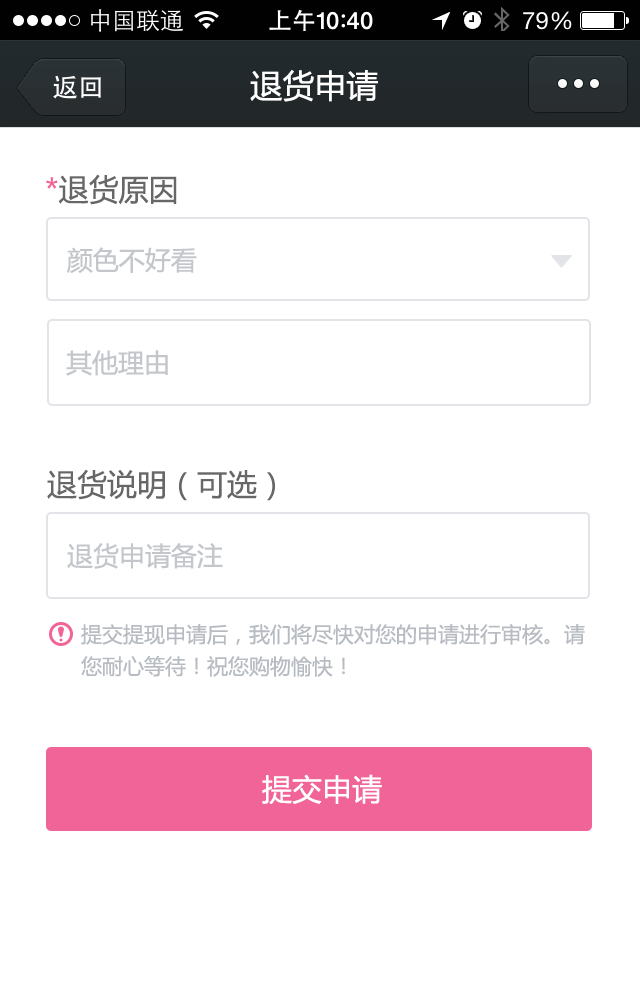
<style>
.page{position:relative;width:640px;height:997px;background:#ffffff}
.page>*{position:absolute;margin:0}
.t1{font:32px "MicrosoftYaHei";color:#ffffff}
.t2{font:30px "MicrosoftYaHei";color:#676767}
.t3{font:30px "MicrosoftYaHei";color:#f16498}
.t4{font:26px "MicrosoftYaHei";color:#c3c6cb}
.t5{font:21px/32px "MicrosoftYaHei";color:#b7bbc2}
.t6{font:30px "MicrosoftYaHei";color:#ffffff}
</style>
<div class="page">
<p class="t1" style="left:250px;top:70px;width:128px;height:32px">退货申请</p>
<p class="t2" style="left:46px;top:174px;width:131px;height:31px"><span class="t3">*</span>退货原因</p>
<p class="t4" style="left:67px;top:247px;width:130px;height:27px">颜色不好看</p>
<p class="t4" style="left:66px;top:350px;width:102px;height:26px">其他理由</p>
<p class="t2" style="left:47px;top:469px;width:228px;height:32px">退货说明（可选）</p>
<p class="t4" style="left:67px;top:543px;width:156px;height:26px">退货申请备注</p>
<p class="t5" style="left:81px;top:624px;width:504px;height:53px">提交提现申请后，我们将尽快对您的申请进行审核。请您耐心等待！祝您购物愉快！</p>
<p class="t6" style="left:262px;top:774px;width:120px;height:30px">提交申请</p>
</div>
